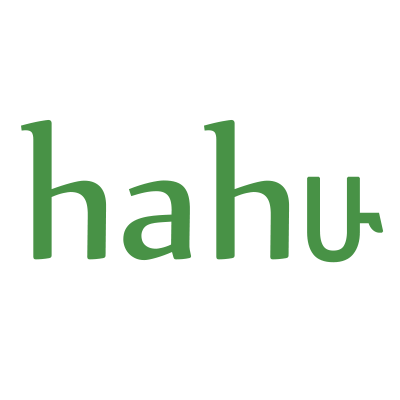
<style>
.page{position:relative;width:400px;height:400px;background:#ffffff}
.page>*{position:absolute;margin:0}
.t1{font:210.1px "Nyala-Regular";color:#499552}
.t2{font:114.7px "NotoSansEthiopic-Regular";color:#499552;font-weight:bold}
</style>
<div class="page">
<p class="t1" style="left:21px;top:119px;width:269px;height:142px">hah</p>
<p class="t2" style="left:307px;top:176px;width:77px;height:87px">ሁ</p>
</div>
